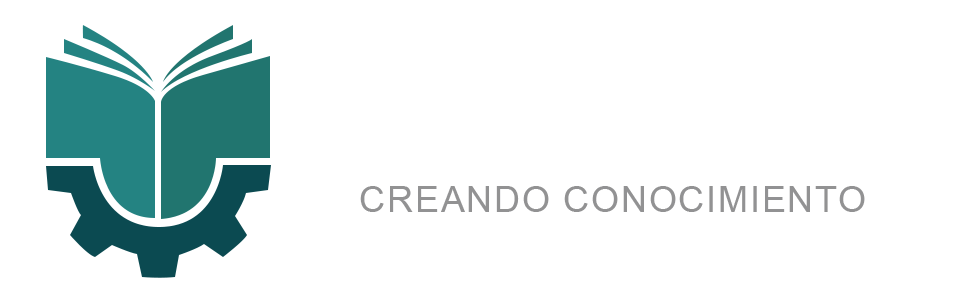
<style>
.page{position:relative;width:980px;height:307px;background:#ffffff}
.page>*{position:absolute;margin:0}
.t1{font:36px "ArialMT";letter-spacing:0.05em;color:#929293}
</style>
<div class="page">
<p class="t1" style="left:360px;top:186px;width:505px;height:26px">CREANDO CONOCIMIENTO</p>
</div>
